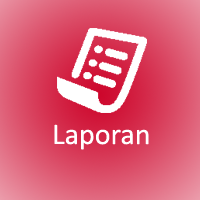
<style>
.page{position:relative;width:200px;height:200px}
.page>*{position:absolute;margin:0}
.t1{font:30px "Calibri";color:#ffffff}
</style>
<div class="page">
<p class="t1" style="left:54px;top:124px;width:95px;height:26px">Laporan</p>
</div>
